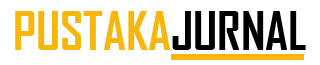
<style>
.page{position:relative;width:320px;height:65px;background:#ffffff}
.page>*{position:absolute;margin:0}
.t1{font:50.8px "AgencyFB-Bold";color:#f6b60b}
.t2{font:50.8px "AgencyFB-Bold";color:#000000}
</style>
<div class="page">
<p class="t1" style="left:15px;top:11px;width:291px;height:39px">PUSTAKA<span class="t2">JURNAL</span></p>
</div>
